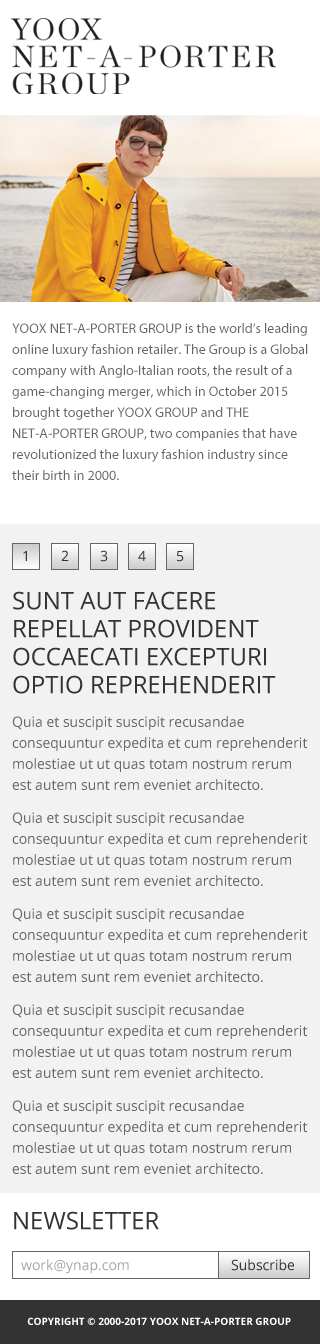
<style>
.page{position:relative;width:320px;height:1344px;background:#f2f2f2}
.page>*{position:absolute;margin:0}
.t1{font:14px/21px "MyriadPro-Regular";color:#666666}
.t2{font:14px "OpenSans";color:#333333}
.t3{font:24px/28px "OpenSans";color:#333333;text-transform:uppercase}
.t4{font:14px/21px "OpenSans";color:#666666}
.t5{font:24px "OpenSans";color:#333333;text-transform:uppercase}
.t6{font:14px "OpenSans";color:#a7a7a7}
.t7{font:10px "OpenSans-Bold";color:#ffffff}
</style>
<div class="page">
<p class="t1" style="left:12px;top:323px;width:296px;height:157px">YOOX NET-A-PORTER GROUP is the world’s leading online luxury fashion retailer. The Group is a Global company with Anglo-Italian roots, the result of a game-changing merger, which in October 2015 brought together YOOX GROUP and THE NET-A-PORTER GROUP, two companies that have revolutionized the luxury fashion industry since their birth in 2000.</p>
<p class="t2" style="left:23px;top:551px;width:4px;height:10px">1</p>
<p class="t2" style="left:61px;top:550px;width:8px;height:11px">2</p>
<p class="t2" style="left:100px;top:550px;width:8px;height:12px">3</p>
<p class="t2" style="left:138px;top:551px;width:8px;height:10px">4</p>
<p class="t2" style="left:177px;top:551px;width:7px;height:11px">5</p>
<p class="t3" style="left:13px;top:591px;width:263px;height:103px">sunt aut facere repellat provident occaecati excepturi optio reprehenderit</p>
<p class="t4" style="left:12px;top:716px;width:296px;height:458px">Quia et suscipit suscipit recusandae consequuntur expedita et cum reprehenderit molestiae ut ut quas totam nostrum rerum est autem sunt rem eveniet architecto. <br>Quia et suscipit suscipit recusandae consequuntur expedita et cum reprehenderit molestiae ut ut quas totam nostrum rerum est autem sunt rem eveniet architecto. <br>Quia et suscipit suscipit recusandae consequuntur expedita et cum reprehenderit molestiae ut ut quas totam nostrum rerum est autem sunt rem eveniet architecto. <br>Quia et suscipit suscipit recusandae consequuntur expedita et cum reprehenderit molestiae ut ut quas totam nostrum rerum est autem sunt rem eveniet architecto. <br>Quia et suscipit suscipit recusandae consequuntur expedita et cum reprehenderit molestiae ut ut quas totam nostrum rerum est autem sunt rem eveniet architecto.</p>
<p class="t5" style="left:14px;top:1211px;width:145px;height:19px">newsletter</p>
<p class="t6" style="left:21px;top:1259px;width:108px;height:15px">work@ynap.com</p>
<p class="t2" style="left:231px;top:1259px;width:63px;height:12px">Subscribe</p>
<p class="t7" style="left:27px;top:1317px;width:264px;height:8px">COPYRIGHT © 2000-2017 YOOX NET-A-PORTER GROUP</p>
</div>
